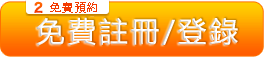
<style>
.page{position:relative;width:264px;height:57px}
.page>*{position:absolute;margin:0}
.t1{font:11px "MicrosoftYaHei";letter-spacing:0.1em;color:#f33b00}
.t2{font:28px "MicrosoftYaHei";letter-spacing:0.1em;color:#ffffff;font-weight:bold}
</style>
<div class="page">
<p class="t1" style="left:50px;top:2px;width:47px;height:11px">免費預約</p>
<p class="t2" style="left:36px;top:17px;width:202px;height:29px">免費註冊/登錄</p>
</div>
